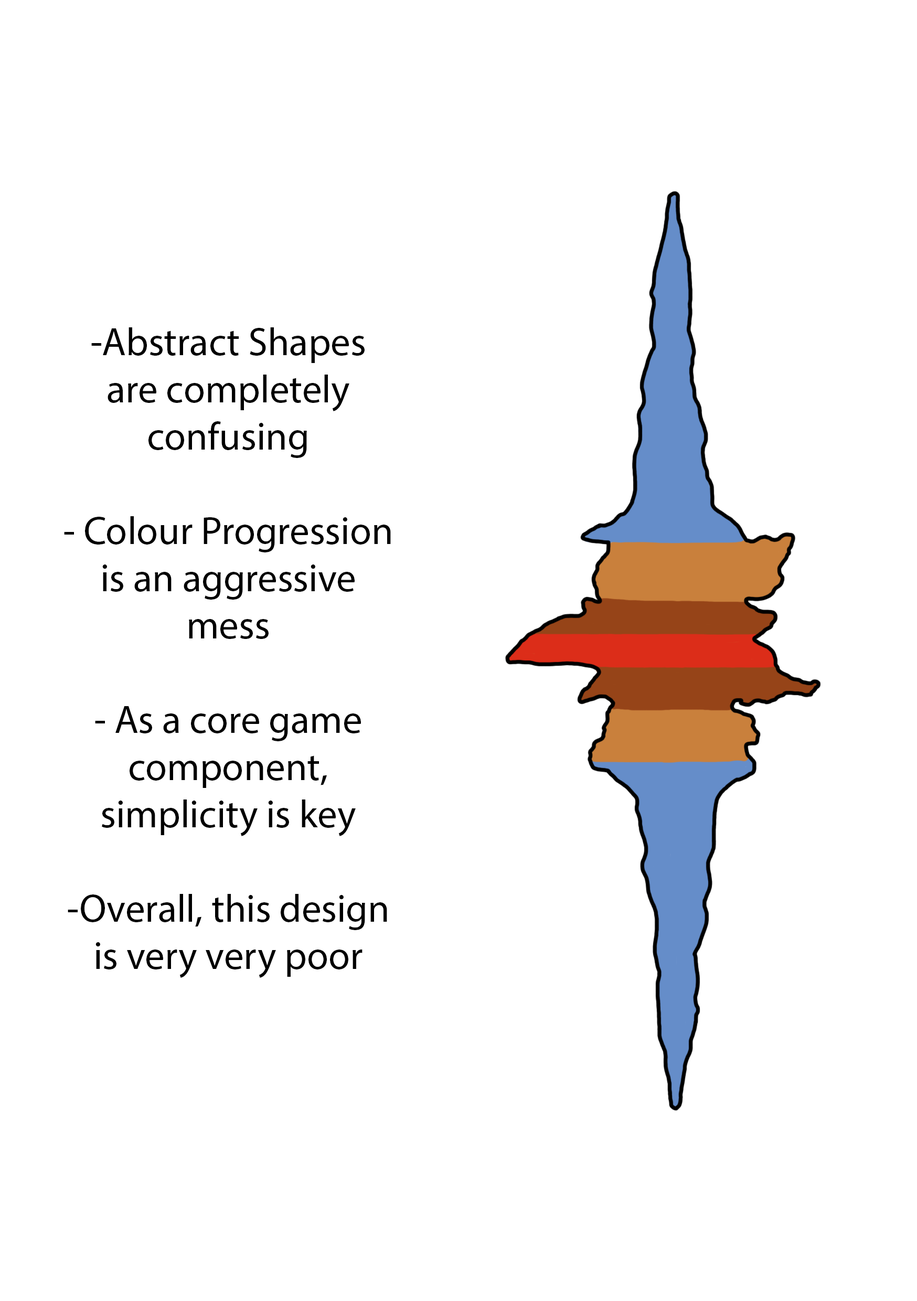
<style>
.page{position:relative;width:917px;height:1301px;background:#ffffff}
.page>*{position:absolute;margin:0}
.t1{font:39.3px "MyriadPro-Regular";color:#000000}
</style>
<div class="page">
<p class="t1" style="left:64px;top:327px;width:327px;height:651px;text-align:center">-Abstract Shapes<br>are completely<br>confusing<br><br>- Colour Progression<br>is an aggressive<br>mess<br><br>- As a core game<br>component,<br>simplicity is key<br><br>-Overall, this design<br>is very very poor</p>
</div>
